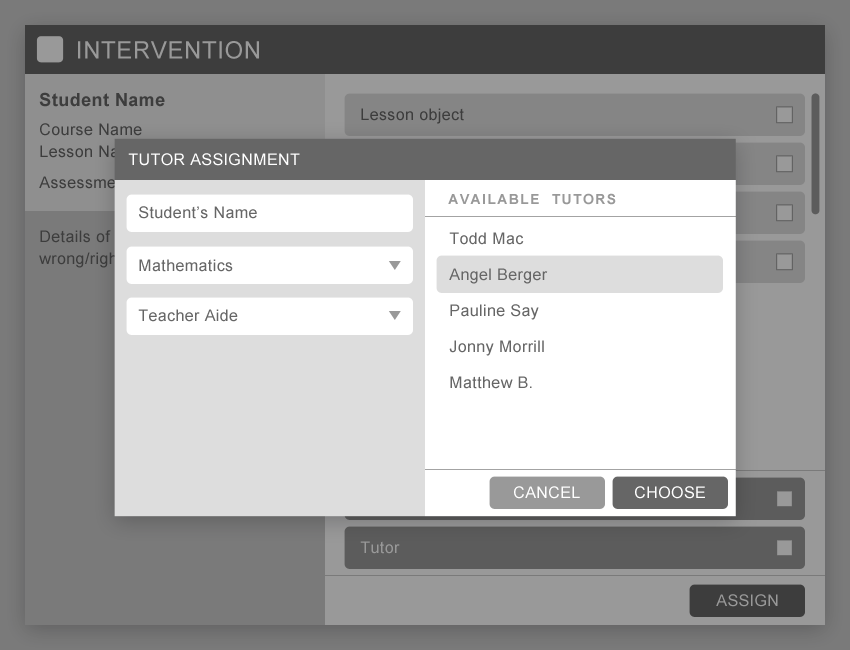
<style>
.page{position:relative;width:850px;height:650px;background:#ffffff}
.page>*{position:absolute;margin:0}
.t1{font:24px "ArialMT";letter-spacing:0.025em;color:#999999}
.t2{font:18px "Arial-BoldMT";letter-spacing:0.025em;color:#3d3d3d}
.t3{font:16px "ArialMT";letter-spacing:0.025em;color:#3d3d3d}
.t4{font:16px/22px "ArialMT";letter-spacing:0.025em;color:#3d3d3d}
.t5{font:16px "ArialMT";letter-spacing:0.025em;color:#ffffff}
.t6{font:14px "Arial-BoldMT";letter-spacing:0.1em;color:#999999}
.t7{font:16px "ArialMT";letter-spacing:0.025em;color:#666666}
.t8{font:16px/36px "ArialMT";letter-spacing:0.025em;color:#666666}
.t9{font:16px "ArialMT";letter-spacing:0.025em;color:#999999}
</style>
<div class="page">
<p class="t1" style="left:78px;top:41px;width:181px;height:18px">INTERVENTION</p>
<p class="t2" style="left:39px;top:92px;width:126px;height:15px">Student Name</p>
<p class="t3" style="left:361px;top:108px;width:103px;height:16px">Lesson object</p>
<p class="t4" style="left:40px;top:123px;width:102px;height:35px">Course Name<br>Lesson Name</p>
<p class="t5" style="left:128px;top:153px;width:172px;height:13px">TUTOR ASSIGNMENT</p>
<p class="t6" style="left:448px;top:193px;width:168px;height:12px">AVAILABLE  TUTORS</p>
<p class="t7" style="left:139px;top:206px;width:118px;height:13px">Student’s Name</p>
<p class="t8" style="left:449px;top:232px;width:99px;height:157px">Todd Mac<br>Angel Berger<br>Pauline Say<br>Jonny Morrill<br>Matthew B.</p>
<p class="t7" style="left:139px;top:259px;width:94px;height:13px">Mathematics</p>
<p class="t7" style="left:138px;top:309px;width:100px;height:13px">Teacher Aide</p>
<p class="t5" style="left:514px;top:486px;width:66px;height:13px">CANCEL</p>
<p class="t5" style="left:635px;top:486px;width:70px;height:13px">CHOOSE</p>
<p class="t9" style="left:360px;top:541px;width:40px;height:13px">Tutor</p>
<p class="t9" style="left:716px;top:594px;width:62px;height:13px">ASSIGN</p>
</div>
